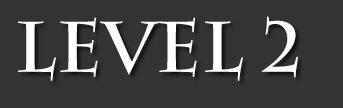
<style>
.page{position:relative;width:343px;height:108px;background:#333333}
.page>*{position:absolute;margin:0}
.t1{font:71.6px "CharlemagneStd-Bold";color:#ffffff}
</style>
<div class="page">
<p class="t1" style="left:18px;top:16px;width:280px;height:65px">LEVEL 2</p>
</div>
